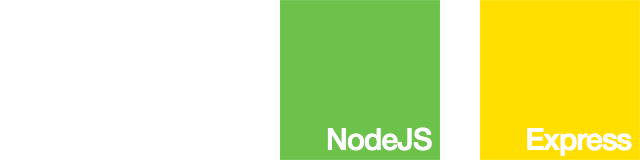
<style>
.page{position:relative;width:640px;height:160px;background:#ffffff}
.page>*{position:absolute;margin:0}
.t1{font:30px "HelveticaNeue-Medium";letter-spacing:-0.025em;color:#ffffff}
</style>
<div class="page">
<p class="t1" style="left:327px;top:127px;width:105px;height:24px">NodeJS</p>
<p class="t1" style="left:527px;top:128px;width:105px;height:28px">Express</p>
</div>
